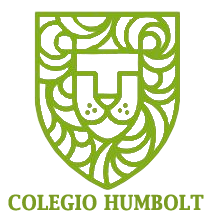
<style>
.page{position:relative;width:216px;height:220px;background:#ffffff}
.page>*{position:absolute;margin:0}
.t1{font:20px "LucidaBright-Demi";letter-spacing:0.025em;color:#7a9c23;font-weight:bold;scale:0.9 1}
</style>
<div class="page">
<p class="t1" style="left:8px;top:194px;width:196px;height:17px">COLEGIO HUMBOLT</p>
</div>
